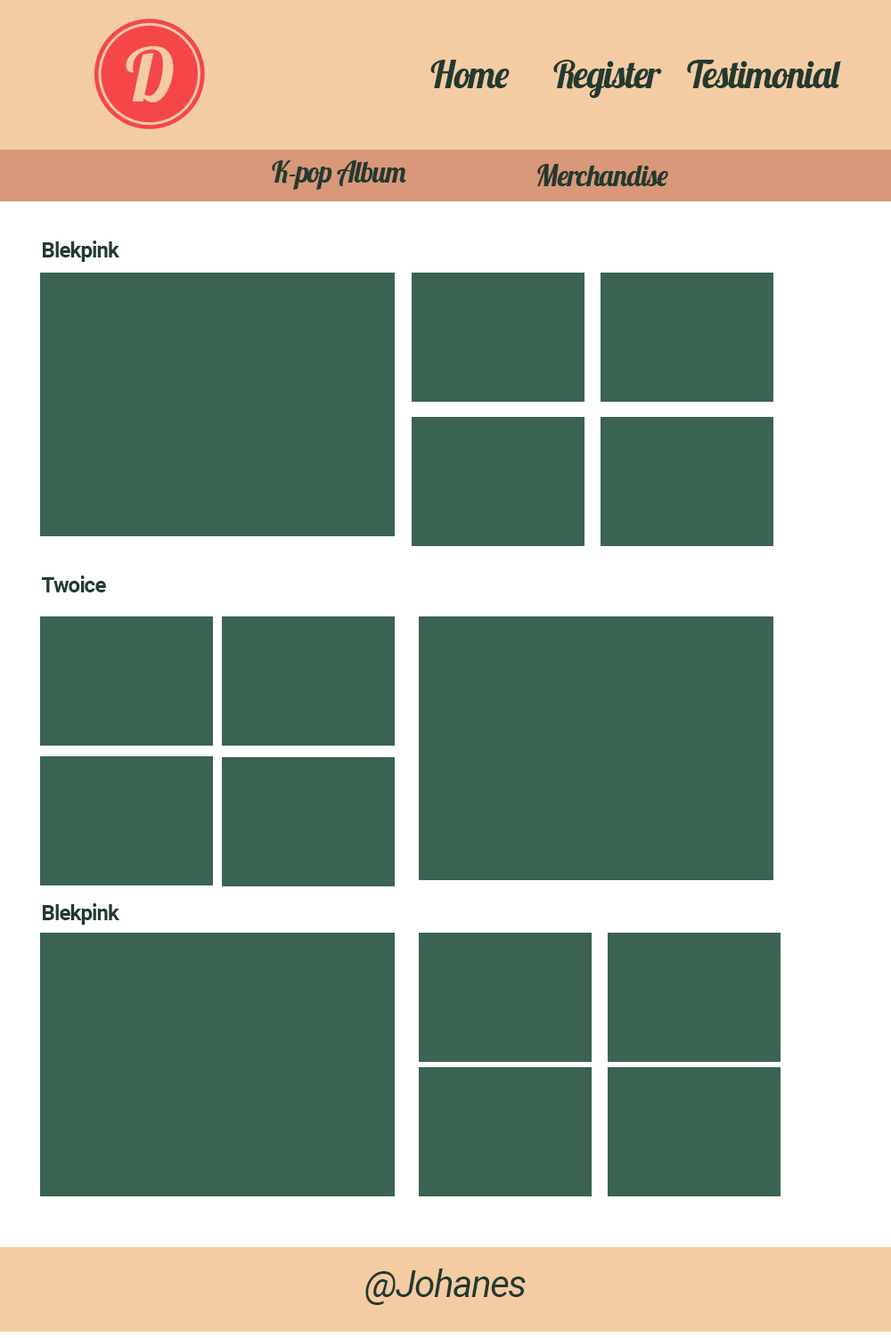
<style>
.page{position:relative;width:891px;height:1338px;background:#3a6351}
.page>*{position:absolute;margin:0}
.t1{font:37.4px "Lobster-Regular";letter-spacing:-0.04em;color:#223a2f}
.t2{font:28.7px "Lobster-Regular";letter-spacing:-0.04em;color:#223a2f}
.t3{font:21.4px "Roboto-Bold";letter-spacing:-0.04em;color:#223a2f}
.t4{font:37.4px "Roboto-Italic";letter-spacing:-0.04em;color:#223a2f}
</style>
<div class="page">
<p class="t1" style="left:430px;top:60px;width:80px;height:28px">Home</p>
<p class="t1" style="left:553px;top:60px;width:109px;height:38px">Register</p>
<p class="t1" style="left:687px;top:60px;width:154px;height:28px">Testimonial</p>
<p class="t2" style="left:272px;top:160px;width:134px;height:30px">K-pop Album</p>
<p class="t2" style="left:537px;top:164px;width:131px;height:22px">Merchandise</p>
<p class="t3" style="left:43px;top:241px;width:77px;height:21px">Blekpink</p>
<p class="t3" style="left:42px;top:576px;width:64px;height:17px">Twoice</p>
<p class="t3" style="left:43px;top:903px;width:77px;height:22px">Blekpink</p>
<p class="t4" style="left:365px;top:1269px;width:161px;height:36px">@Johanes</p>
</div>
